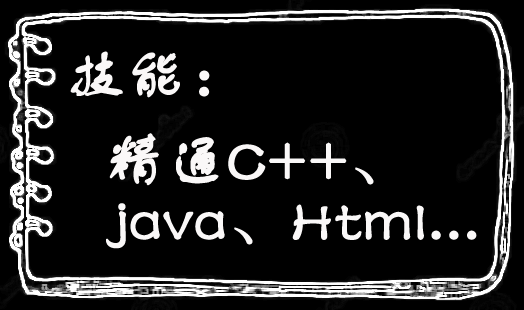
<style>
.page{position:relative;width:524px;height:310px;background:#000000}
.page>*{position:absolute;margin:0}
.t1{font:60px "FZSTK--GBK1-0";color:#faf8f8;font-weight:bold}
.t2{font:60px/60px "FZSTK--GBK1-0";color:#faf8f8;font-weight:bold}
</style>
<div class="page">
<p class="t1" style="left:70px;top:51px;width:140px;height:47px">技能：</p>
<p class="t2" style="left:106px;top:133px;width:371px;height:116px">精通C++、<br>java、Html...</p>
</div>
